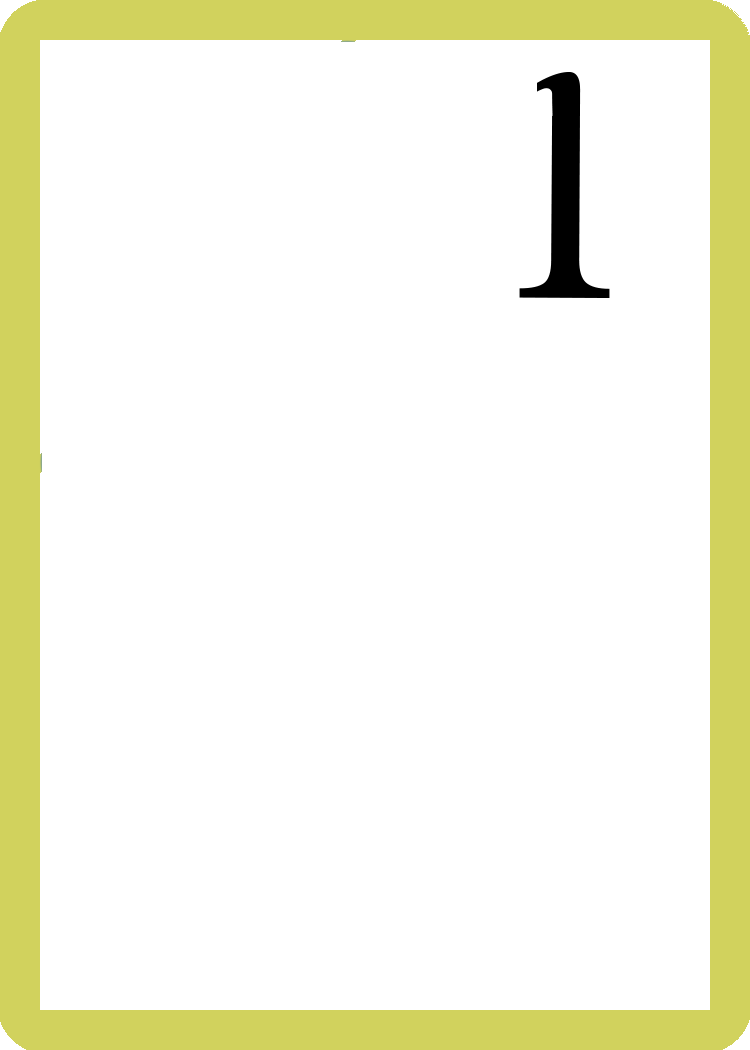
<style>
.page{position:relative;width:750px;height:1050px;background:#ffffff}
.page>*{position:absolute;margin:0}
.t1{font:458.3px "Dungeon";color:#000000}
</style>
<div class="page">
<p class="t1" style="left:519px;top:72px;width:91px;height:226px">1</p>
</div>
